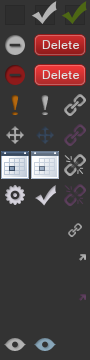
<style>
.page{position:relative;width:90px;height:360px;background:#333333}
.page>*{position:absolute;margin:0}
.t1{font:12px "HelveticaNeue";letter-spacing:0.05em;color:#e3e3e3}
.t2{font:29.1px "LaoMN";color:#a65f0d;scale:1.85 1}
.t3{font:29.1px "LaoMN";color:#a4a4a4;scale:1.85 1}
</style>
<div class="page">
<p class="t1" style="left:42px;top:40px;width:37px;height:9px">Delete</p>
<p class="t1" style="left:42px;top:70px;width:37px;height:9px">Delete</p>
<p class="t2" style="left:11px;top:95px;width:8px;height:20px">!</p>
<p class="t3" style="left:41px;top:95px;width:8px;height:20px">!</p>
</div>
